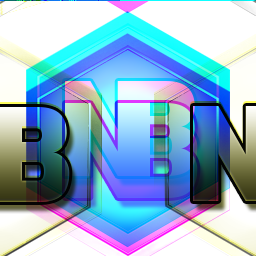
<style>
.page{position:relative;width:256px;height:256px}
.page>*{position:absolute;margin:0}
.t1{font:130px "Exo-Black";letter-spacing:-0.215em}
</style>
<div class="page">
<p class="t1" style="left:65px;top:80px;width:133px;height:95px">NB</p>
</div>
